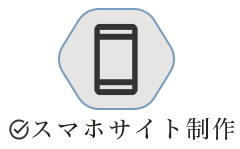
<style>
.page{position:relative;width:240px;height:149px;background:#ffffff}
.page>*{position:absolute;margin:0}
.t1{font:24px "HiraMinPro-W3";letter-spacing:0.08em;color:#25271f}
</style>
<div class="page">
<p class="t1" style="left:32px;top:117px;width:203px;height:23px">スマホサイト制作</p>
</div>
